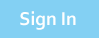
<style>
.page{position:relative;width:99px;height:38px;background:#83d0f3}
.page>*{position:absolute;margin:0}
.t1{font:19.4px "Corbel-Bold";color:#fefefe}
</style>
<div class="page">
<p class="t1" style="left:20px;top:11px;width:56px;height:19px">Sign In</p>
</div>
